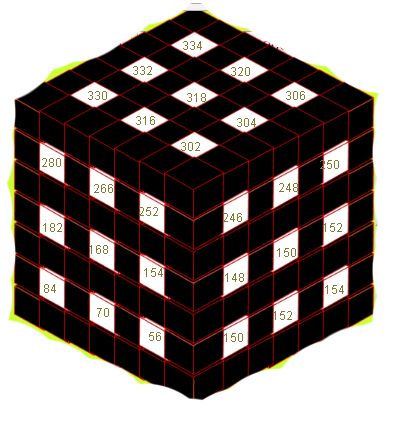
<style>
.page{position:relative;width:405px;height:422px;background:#ffffff}
.page>*{position:absolute;margin:0}
.t1{font:12px "ArialMT";color:#817931}
</style>
<div class="page">
<p class="t1" style="left:183px;top:41px;width:19px;height:9px">334</p>
<p class="t1" style="left:133px;top:66px;width:19px;height:9px">332</p>
<p class="t1" style="left:231px;top:67px;width:19px;height:9px">320</p>
<p class="t1" style="left:88px;top:91px;width:19px;height:9px">330</p>
<p class="t1" style="left:187px;top:93px;width:19px;height:9px">318</p>
<p class="t1" style="left:286px;top:91px;width:19px;height:9px">306</p>
<p class="t1" style="left:136px;top:116px;width:19px;height:9px">316</p>
<p class="t1" style="left:237px;top:118px;width:19px;height:9px">304</p>
<p class="t1" style="left:181px;top:142px;width:19px;height:9px">302</p>
<p class="t1" style="left:42px;top:158px;width:19px;height:9px">280</p>
<p class="t1" style="left:320px;top:160px;width:19px;height:9px">250</p>
<p class="t1" style="left:94px;top:184px;width:19px;height:9px">266</p>
<p class="t1" style="left:279px;top:183px;width:19px;height:9px">248</p>
<p class="t1" style="left:139px;top:207px;width:19px;height:9px">252</p>
<p class="t1" style="left:223px;top:213px;width:19px;height:9px">246</p>
<p class="t1" style="left:43px;top:223px;width:19px;height:9px">182</p>
<p class="t1" style="left:323px;top:223px;width:19px;height:9px">152</p>
<p class="t1" style="left:89px;top:245px;width:19px;height:9px">168</p>
<p class="t1" style="left:277px;top:248px;width:19px;height:9px">150</p>
<p class="t1" style="left:144px;top:268px;width:19px;height:9px">154</p>
<p class="t1" style="left:225px;top:273px;width:19px;height:9px">148</p>
<p class="t1" style="left:44px;top:284px;width:12px;height:9px">84</p>
<p class="t1" style="left:325px;top:285px;width:19px;height:9px">154</p>
<p class="t1" style="left:97px;top:308px;width:12px;height:9px">70</p>
<p class="t1" style="left:273px;top:311px;width:19px;height:9px">152</p>
<p class="t1" style="left:149px;top:332px;width:12px;height:9px">56</p>
<p class="t1" style="left:224px;top:333px;width:19px;height:9px">150</p>
</div>
